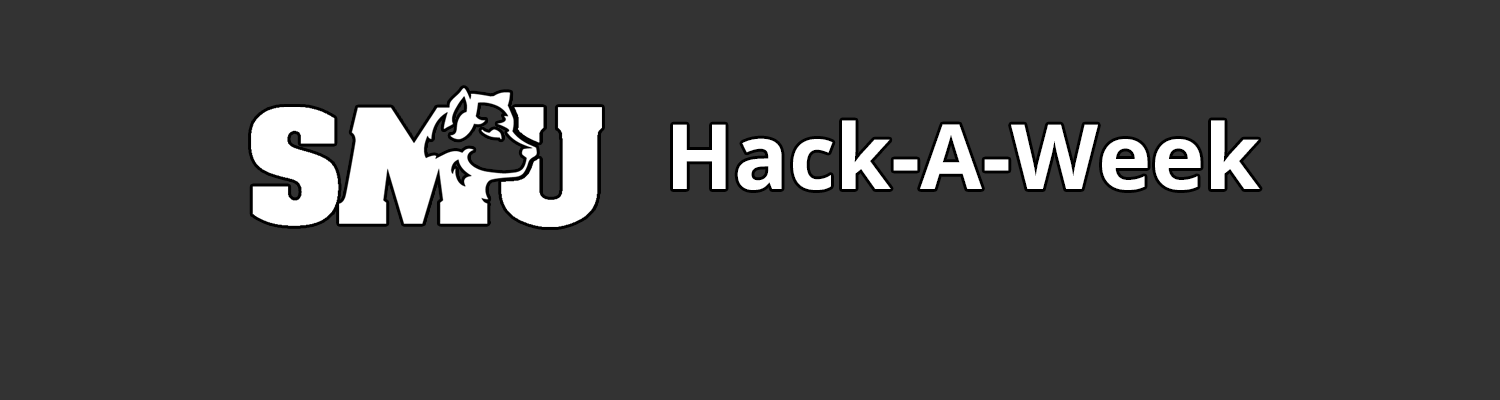
<style>
.page{position:relative;width:1500px;height:400px;background:#333333}
.page>*{position:absolute;margin:0}
.t1{font:90px "OpenSans-Bold";color:#ffffff}
</style>
<div class="page">
<p class="t1" style="left:673px;top:120px;width:587px;height:70px">Hack-A-Week</p>
</div>
